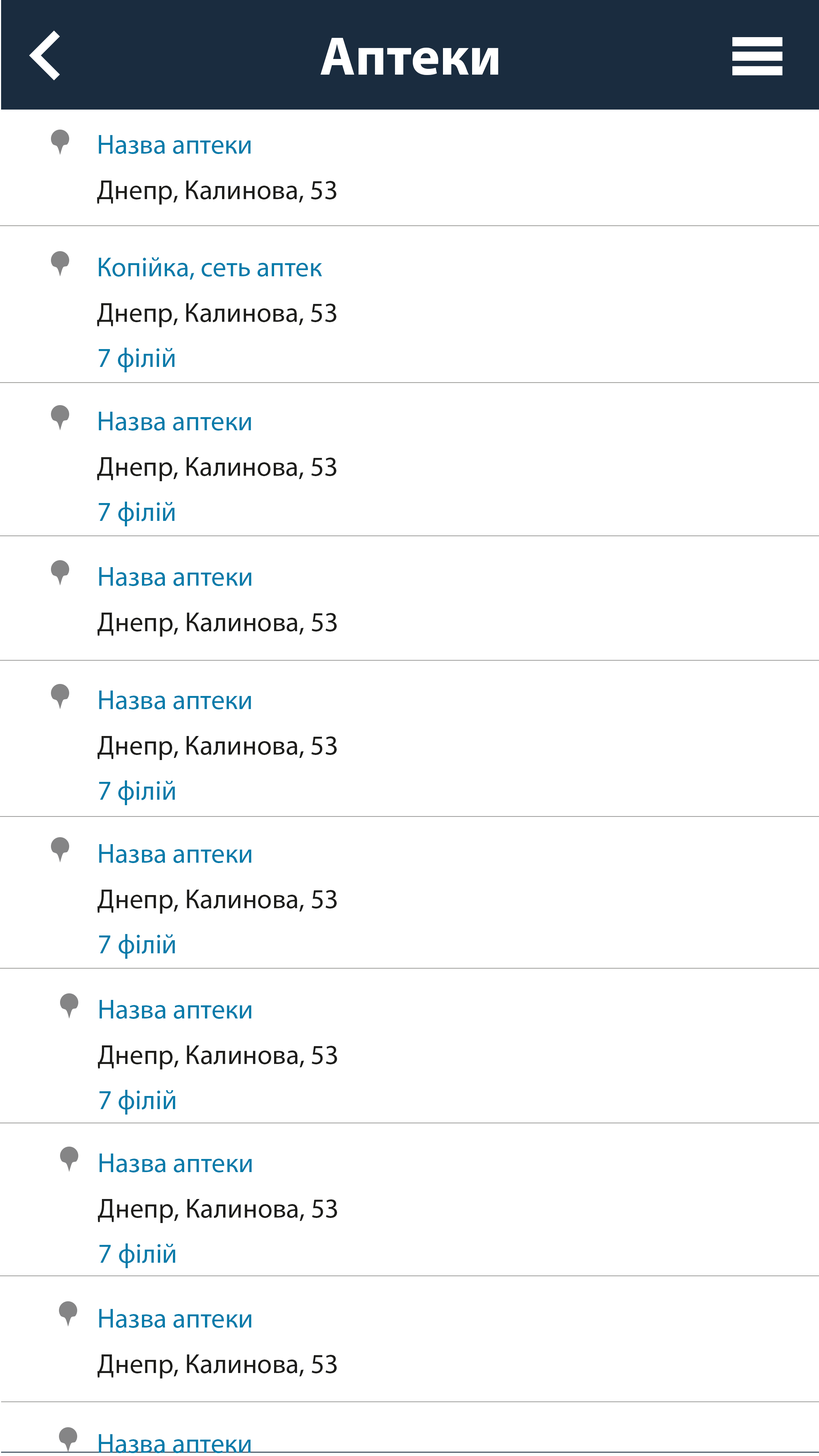
<style>
.page{position:relative;width:819px;height:1456px;background:#ffffff}
.page>*{position:absolute;margin:0}
.t1{font:54.6px "MyriadPro-Bold";color:#ffffff}
.t2{font:27.3px "MyriadPro-Regular";color:#077baa}
.t3{font:27.3px "MyriadPro-Regular";color:#1d1d1b}
</style>
<div class="page">
<p class="t1" style="left:320px;top:38px;width:178px;height:37px">Аптеки</p>
<p class="t2" style="left:99px;top:135px;width:152px;height:19px">Назва аптеки</p>
<p class="t3" style="left:97px;top:181px;width:239px;height:24px">Днепр, Калинова, 53</p>
<p class="t2" style="left:99px;top:257px;width:223px;height:23px">Копійка, сеть аптек</p>
<p class="t3" style="left:97px;top:303px;width:239px;height:24px">Днепр, Калинова, 53</p>
<p class="t2" style="left:99px;top:348px;width:76px;height:24px">7 філій</p>
<p class="t2" style="left:99px;top:412px;width:152px;height:19px">Назва аптеки</p>
<p class="t3" style="left:97px;top:457px;width:239px;height:24px">Днепр, Калинова, 53</p>
<p class="t2" style="left:99px;top:502px;width:76px;height:24px">7 філій</p>
<p class="t2" style="left:99px;top:567px;width:153px;height:19px">Назва аптеки</p>
<p class="t3" style="left:97px;top:613px;width:240px;height:24px">Днепр, Калинова, 53</p>
<p class="t2" style="left:99px;top:690px;width:152px;height:19px">Назва аптеки</p>
<p class="t3" style="left:97px;top:736px;width:240px;height:24px">Днепр, Калинова, 53</p>
<p class="t2" style="left:99px;top:780px;width:76px;height:25px">7 філій</p>
<p class="t2" style="left:99px;top:844px;width:153px;height:19px">Назва аптеки</p>
<p class="t3" style="left:97px;top:890px;width:240px;height:24px">Днепр, Калинова, 53</p>
<p class="t2" style="left:99px;top:934px;width:76px;height:25px">7 філій</p>
<p class="t2" style="left:99px;top:1000px;width:153px;height:19px">Назва аптеки</p>
<p class="t3" style="left:98px;top:1045px;width:239px;height:24px">Днепр, Калинова, 53</p>
<p class="t2" style="left:99px;top:1090px;width:76px;height:25px">7 філій</p>
<p class="t2" style="left:99px;top:1154px;width:153px;height:18px">Назва аптеки</p>
<p class="t3" style="left:98px;top:1199px;width:239px;height:24px">Днепр, Калинова, 53</p>
<p class="t2" style="left:99px;top:1243px;width:76px;height:25px">7 філій</p>
<p class="t2" style="left:99px;top:1309px;width:153px;height:19px">Назва аптеки</p>
<p class="t3" style="left:97px;top:1354px;width:240px;height:24px">Днепр, Калинова, 53</p>
<p class="t2" style="left:99px;top:1434px;width:152px;height:19px">Назва аптеки</p>
</div>
